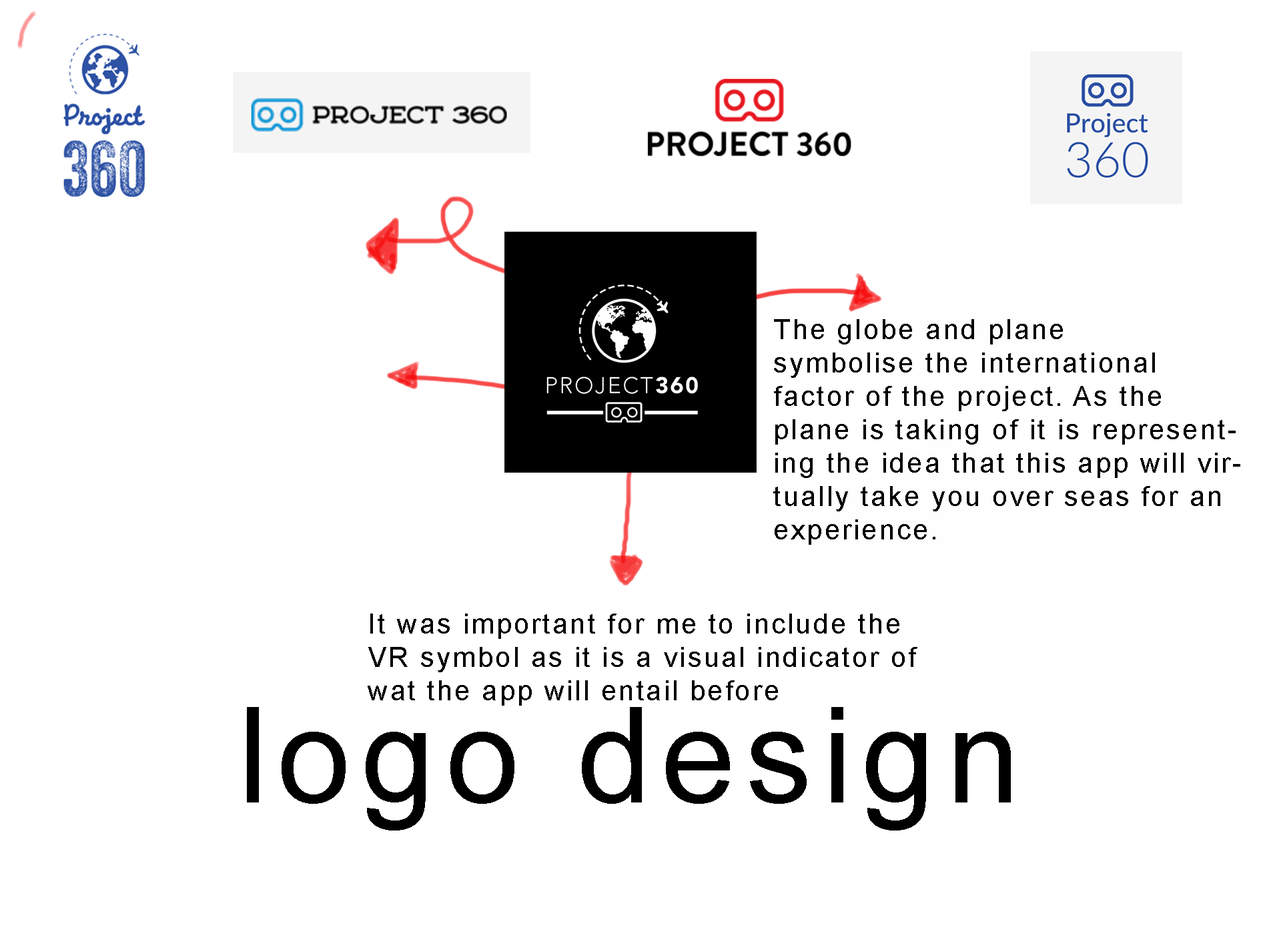
<style>
.page{position:relative;width:1261px;height:946px;background:#ffffff}
.page>*{position:absolute;margin:0}
.t1{font:27.8px "ArialMT";letter-spacing:0.075em;color:#000000}
</style>
<div class="page">
<p class="t1" style="left:773px;top:319px;width:467px;height:225px">The globe and plane <br>symbolise the international factor of the project. As the plane is taking of it is representing the idea that this app will virtually take you over seas for an experience.</p>
<p class="t1" style="left:368px;top:613px;width:549px;height:92px">It was important for me to include the VR symbol as it is a visual indicator of wat the app will entail before</p>
</div>
